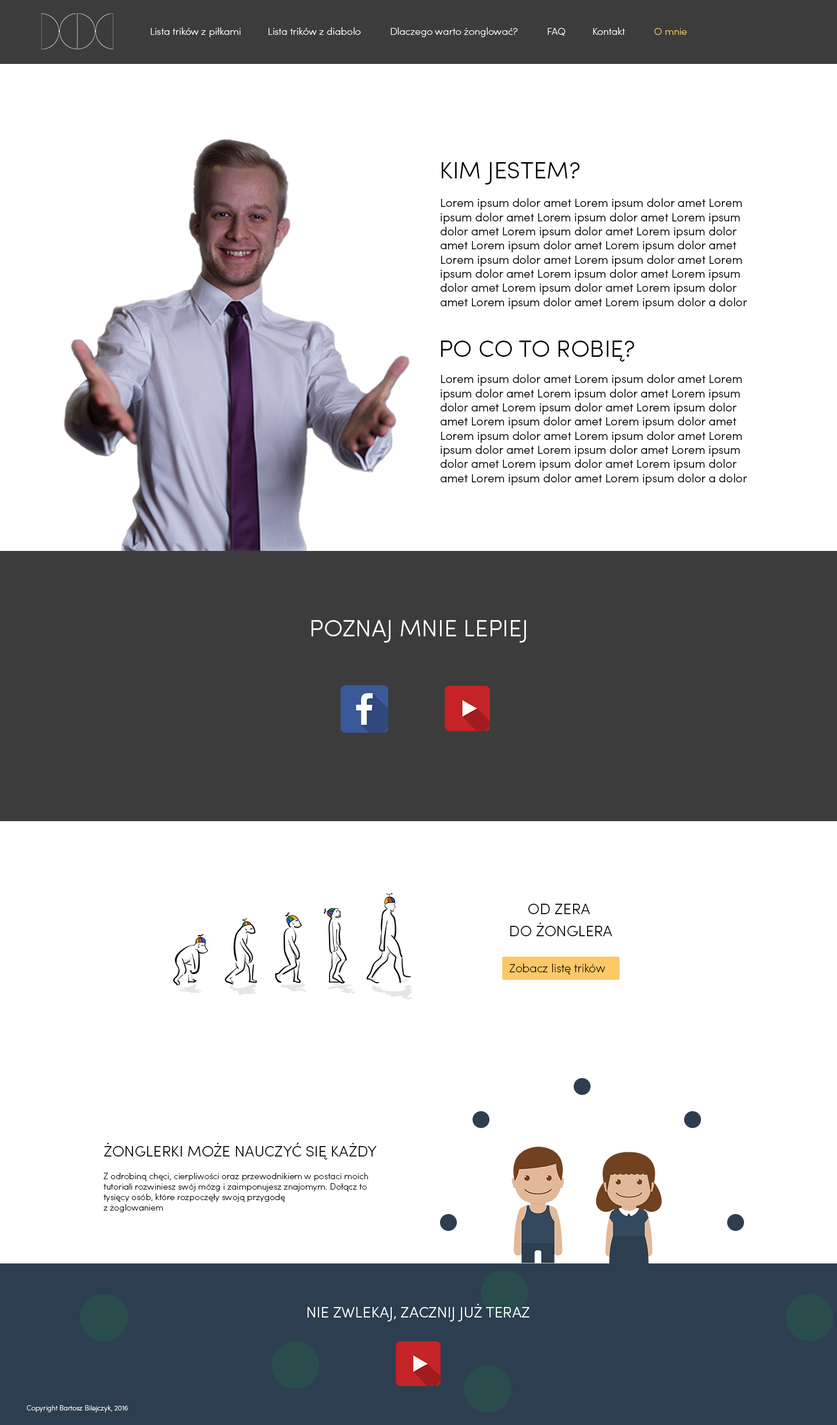
<style>
.page{position:relative;width:837px;height:1425px;background:#ffffff}
.page>*{position:absolute;margin:0}
.t1{font:9.9px "SofiaProExtraLight";color:#ffffff}
.t2{font:9.9px "SofiaProExtraLight";color:#fcc868}
.t3{font:23.6px "SofiaProLight";color:#000000}
.t4{font:11.8px "SofiaProLight";color:#000000}
.t5{font:23.6px "SofiaProLight";color:#ffffff}
.t6{font:15.1px "SofiaProLight";color:#000000}
.t7{font:11.6px "SofiaProExtraLight";color:#000000}
.t8{font:8.7px "SofiaProExtraLight";color:#000000}
.t9{font:15.1px "SofiaProLight";color:#ffffff}
.t10{font:7px "SofiaProExtraLight";color:#ffffff}
</style>
<div class="page">
<p class="t1" style="left:151px;top:27px;width:536px;height:10px">Lista trików z piłkami          Lista trików z diabolo           Dlaczego warto żonglować?           FAQ          Kontakt           <span class="t2">O mnie</span></p>
<p class="t3" style="left:442px;top:162px;width:137px;height:23px">KIM JESTEM?</p>
<p class="t4" style="left:440px;top:198px;width:307px;height:111px">Lorem ipsum dolor amet Lorem ipsum dolor amet Lorem ipsum dolor amet Lorem ipsum dolor amet Lorem ipsum dolor amet Lorem ipsum dolor amet Lorem ipsum dolor amet Lorem ipsum dolor amet Lorem ipsum dolor amet Lorem ipsum dolor amet Lorem ipsum dolor amet Lorem ipsum dolor amet Lorem ipsum dolor amet Lorem ipsum dolor amet Lorem ipsum dolor amet Lorem ipsum dolor amet Lorem ipsum dolor amet Lorem ipsum dolor a dolor amet Lorem ipsum dolor amet</p>
<p class="t3" style="left:441px;top:341px;width:193px;height:21px">PO CO TO ROBIĘ?</p>
<p class="t4" style="left:440px;top:374px;width:307px;height:111px">Lorem ipsum dolor amet Lorem ipsum dolor amet Lorem ipsum dolor amet Lorem ipsum dolor amet Lorem ipsum dolor amet Lorem ipsum dolor amet Lorem ipsum dolor amet Lorem ipsum dolor amet Lorem ipsum dolor amet Lorem ipsum dolor amet Lorem ipsum dolor amet Lorem ipsum dolor amet Lorem ipsum dolor amet Lorem ipsum dolor amet Lorem ipsum dolor amet Lorem ipsum dolor amet Lorem ipsum dolor amet Lorem ipsum dolor a dolor amet Lorem ipsum dolor amet</p>
<p class="t5" style="left:311px;top:620px;width:215px;height:23px">POZNAJ MNIE LEPIEJ</p>
<p class="t6" style="left:528px;top:904px;width:62px;height:10px">OD ZERA</p>
<p class="t6" style="left:510px;top:922px;width:102px;height:14px">DO ŻONGLERA</p>
<p class="t7" style="left:509px;top:964px;width:96px;height:11px">Zobacz listę trików</p>
<p class="t6" style="left:104px;top:1143px;width:273px;height:17px">ŻONGLERKI MOŻE NAUCZYĆ SIĘ KAŻDY</p>
<p class="t8" style="left:103px;top:1173px;width:265px;height:39px">Z odrobiną chęci, cierpliwości oraz przewodnikiem w postaci moich tutoriali rozwiniesz swój mózg i zaimponujesz znajomym. Dołącz to tysięcy osób, które rozpoczęły swoją przygodę <br>z żoglowaniem</p>
<p class="t9" style="left:307px;top:1303px;width:222px;height:18px">NIE ZWLEKAJ, ZACZNIJ JUŻ TERAZ</p>
<p class="t10" style="left:27px;top:1405px;width:101px;height:7px">Copyright Bartosz Bilejczyk, 2016</p>
</div>
